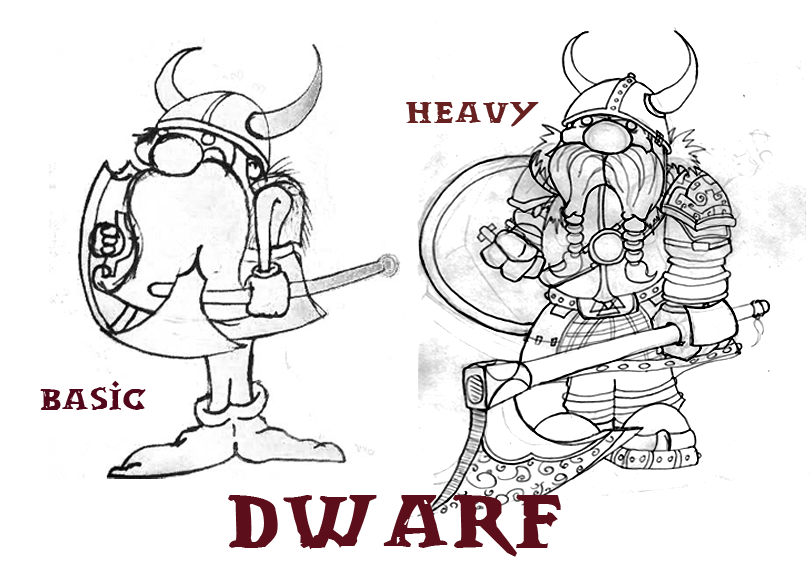
<style>
.page{position:relative;width:810px;height:576px;background:#ffffff}
.page>*{position:absolute;margin:0}
.t1{font:40px "drwnstcr";color:#682121}
.t2{font:40px "drwnstcr";color:#53071b}
.t3{font:100px "drwnstcr";color:#5c0f1a}
</style>
<div class="page">
<p class="t1" style="left:406px;top:102px;width:133px;height:25px">Heavy</p>
<p class="t2" style="left:40px;top:380px;width:106px;height:30px">Basic</p>
<p class="t3" style="left:228px;top:495px;width:333px;height:62px">Dwarf</p>
</div>
